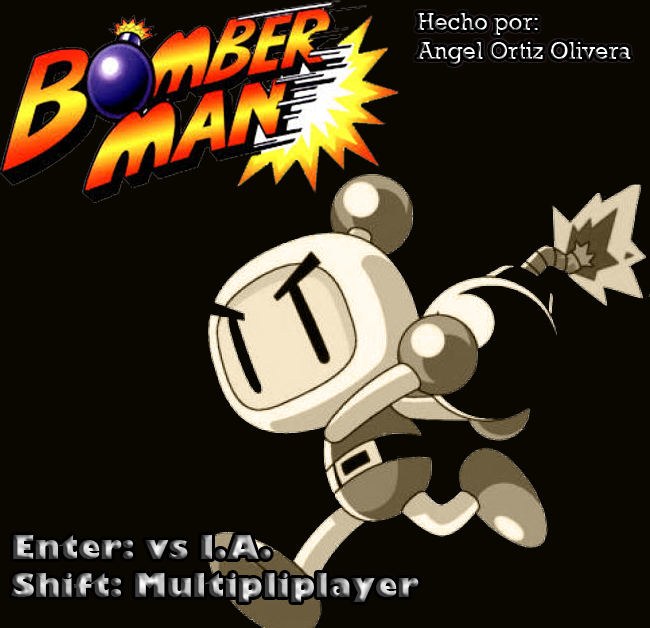
<style>
.page{position:relative;width:650px;height:628px;background:#0a0701}
.page>*{position:absolute;margin:0}
.t1{font:24px "Rockwell"}
.t2{font:32px "GillSans-UltraBold"}
</style>
<div class="page">
<p class="t1" style="left:416px;top:13px;width:215px;height:51px">Hecho por:       <br>Angel Ortiz Olivera</p>
<p class="t2" style="left:11px;top:535px;width:408px;height:67px">Enter: vs I.A.<br>Shift: Multipliplayer</p>
</div>
